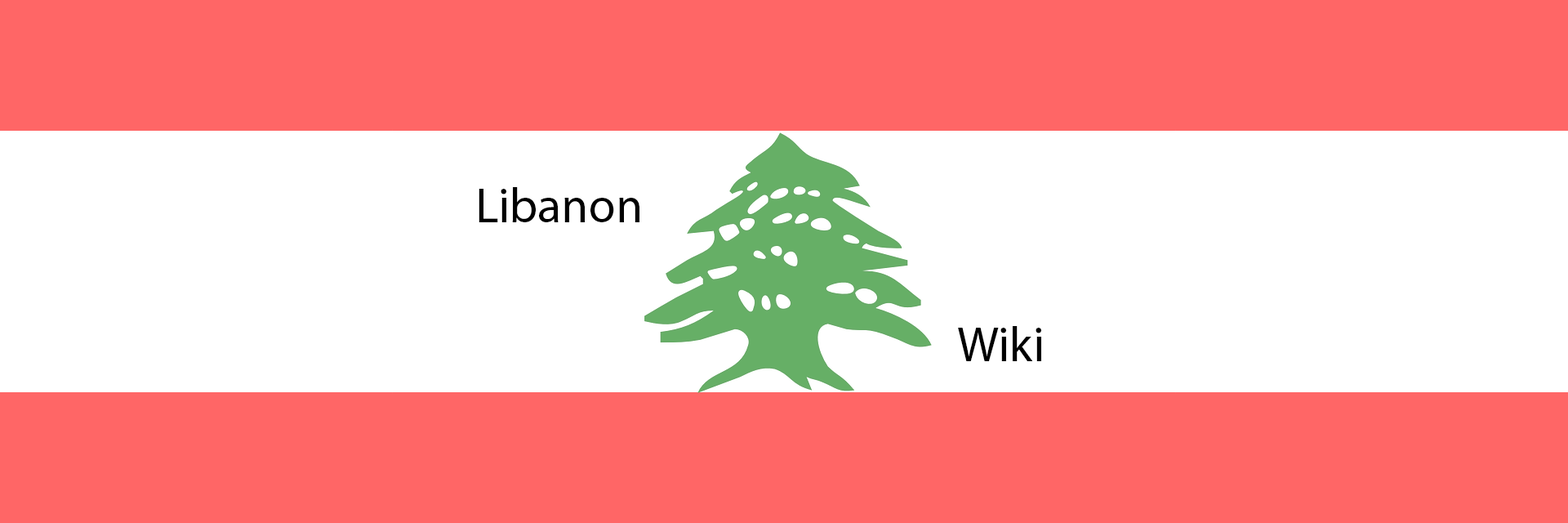
<style>
.page{position:relative;width:1568px;height:523px;background:#ff6666}
.page>*{position:absolute;margin:0}
.t1{font:49px "MyriadPro-Regular";color:#000000}
</style>
<div class="page">
<p class="t1" style="left:479px;top:187px;width:160px;height:35px">Libanon</p>
<p class="t1" style="left:958px;top:326px;width:83px;height:35px">Wiki</p>
</div>
